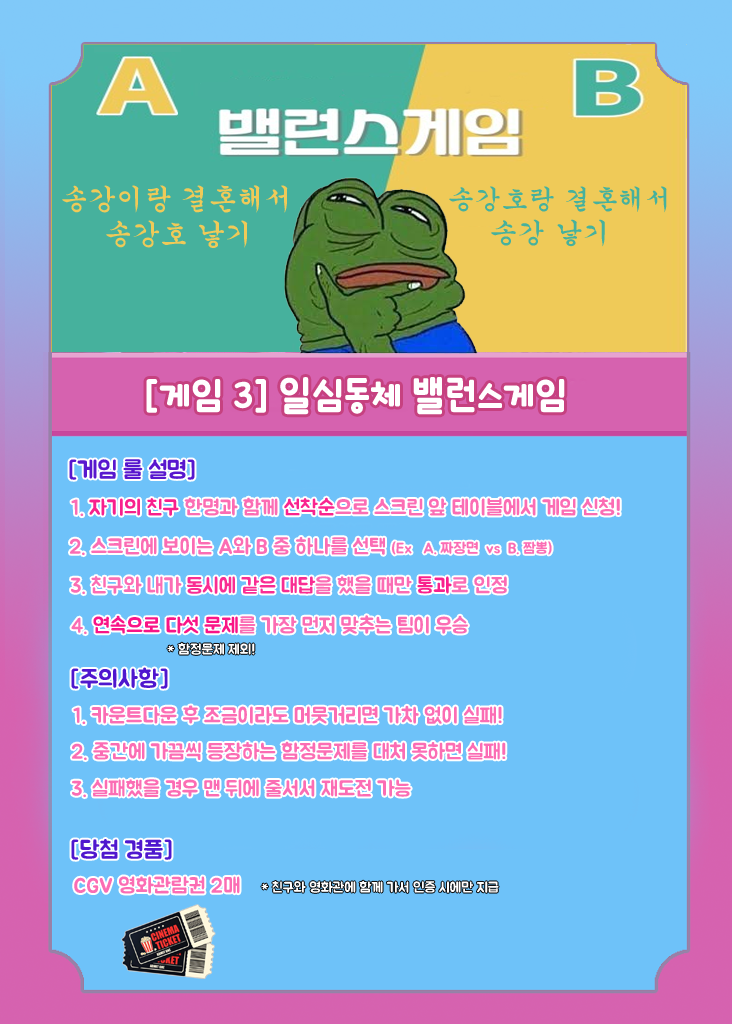
<style>
.page{position:relative;width:732px;height:1024px;background:#6ec2f9}
.page>*{position:absolute;margin:0}
.t1{font:28px "Gungsuh";color:#efca58}
.t2{font:27px "HYgsrB";color:#46b19d}
.t3{font:28px "HYgsrB";color:#46b19d}
.t4{font:40px "icTTHayanbunpilB";color:#ffffff}
.t5{font:24px "Pix_BMJUAOTF";color:#5817ce}
.t6{font:21px "Pix_BMJUAOTF";color:#fb6db4}
.t7{font:21px "Pix_BMJUAOTF";color:#f8208d}
.t8{font:21px "Pix_BMJUAOTF";color:#f9248f}
.t9{font:15px "Pix_BMJUAOTF";color:#fb6db4}
.t10{font:21px "Pix_BMJUAOTF";color:#f92d93}
.t11{font:21px "Pix_BMJUAOTF";color:#f9208d}
.t12{font:21px "Pix_BMJUAOTF";color:#f91487}
.t13{font:14px "Pix_BMJUAOTF";color:#ffffff}
.t14{font:24px "Pix_BMJUAOTF";color:#4f17ce}
</style>
<div class="page">
<p class="t1" style="left:62px;top:185px;width:226px;height:28px">송강이랑 결혼해서</p>
<p class="t2" style="left:449px;top:186px;width:218px;height:27px">송강호랑 결혼해서</p>
<p class="t1" style="left:106px;top:220px;width:142px;height:28px">송강호 낳기</p>
<p class="t3" style="left:491px;top:219px;width:114px;height:28px">송강 낳기</p>
<p class="t4" style="left:146px;top:377px;width:419px;height:38px">[게임 3] 일심동체 밸런스게임</p>
<p class="t5" style="left:69px;top:459px;width:126px;height:21px">[게임 룰 설명]</p>
<p class="t6" style="left:71px;top:497px;width:549px;height:20px">1. <span class="t7">자기의 친구</span> 한명과 함께 <span class="t8">선착순</span>으로 스크린 앞 테이블에서 게임 신청!</p>
<p class="t6" style="left:70px;top:537px;width:482px;height:19px">2. 스크린에 보이는 A와 B 중 하나를 선택 <span class="t9">(Ex   A. 짜장면  vs  B. 짬뽕)</span></p>
<p class="t6" style="left:71px;top:576px;width:436px;height:19px">3. 친구와 내가 <span class="t10">동시에 같은 대답</span>을 했을 때만 <span class="t11">통과</span>로 인정</p>
<p class="t6" style="left:71px;top:615px;width:397px;height:20px">4. <span class="t12">연속으로 다섯 문제</span>를 가장 먼저 맞추는 팀이 우승</p>
<p class="t13" style="left:167px;top:642px;width:88px;height:13px">* 함정문제 제외!</p>
<p class="t14" style="left:71px;top:667px;width:97px;height:22px">[주의사항]</p>
<p class="t6" style="left:73px;top:705px;width:429px;height:20px">1. 카운트다운 후 조금이라도 머뭇거리면 가차 없이 실패!</p>
<p class="t6" style="left:72px;top:741px;width:434px;height:20px">2. 중간에 가끔씩 등장하는 함정문제를 대처 못하면 실패!</p>
<p class="t6" style="left:72px;top:779px;width:339px;height:19px">3. 실패했을 경우 맨 뒤에 줄서서 재도전 가능</p>
<p class="t14" style="left:71px;top:839px;width:101px;height:21px">[당첨 경품]</p>
<p class="t6" style="left:74px;top:876px;width:166px;height:18px">CGV 영화관람권 2매</p>
<p class="t13" style="left:261px;top:880px;width:238px;height:13px">* 친구와 영화관에 함께 가서 인증 시에만 지급</p>
</div>
